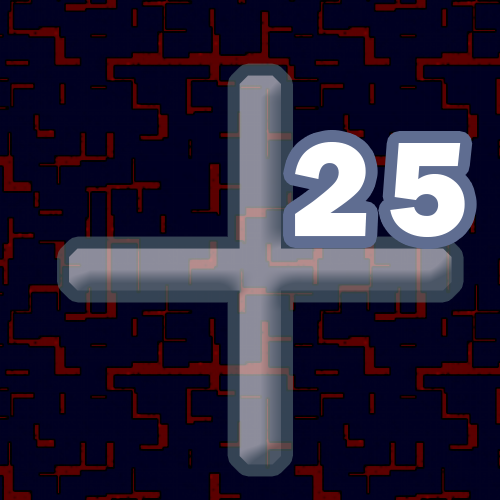
<style>
.page{position:relative;width:500px;height:500px;background:#000022}
.page>*{position:absolute;margin:0}
.t1{font:625px "FuturaBT-Light";letter-spacing:0.03em;color:#ffffff;font-weight:bold}
.t2{font:138.9px "FranklinGothic-Heavy";letter-spacing:0.11em;color:#ffffff}
</style>
<div class="page">
<p class="t1" style="left:69px;top:75px;width:383px;height:390px;opacity:0.55">+</p>
<p class="t2" style="left:295px;top:142px;width:170px;height:95px">25</p>
</div>
